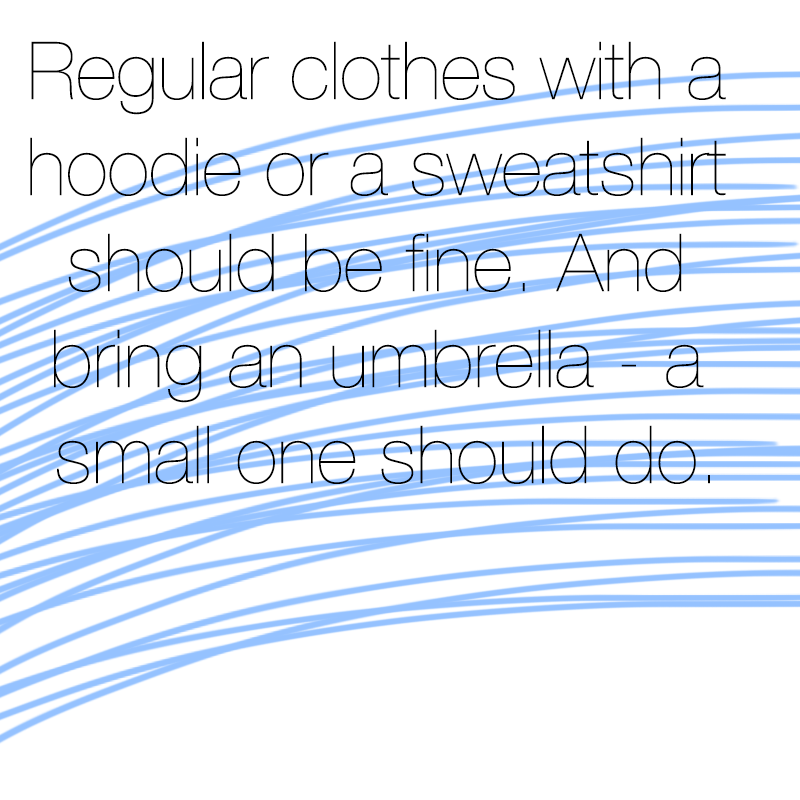
<style>
.page{position:relative;width:800px;height:800px;background:#ffffff}
.page>*{position:absolute;margin:0}
.t1{font:80px "HelveticaNeue-UltraLight";color:#000000}
</style>
<div class="page">
<p class="t1" style="left:30px;top:41px;width:696px;height:443px;text-align:center">Regular clothes with a <br>hoodie or a sweatshirt <br>should be fine. And <br>bring an umbrella - a <br>small one should do.</p>
</div>
